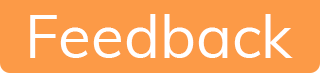
<style>
.page{position:relative;width:320px;height:74px;background:#fc9a47}
.page>*{position:absolute;margin:0}
.t1{font:60px "Muli-Regular";color:#ffffff}
</style>
<div class="page">
<p class="t1" style="left:30px;top:14px;width:263px;height:44px">Feedback</p>
</div>
